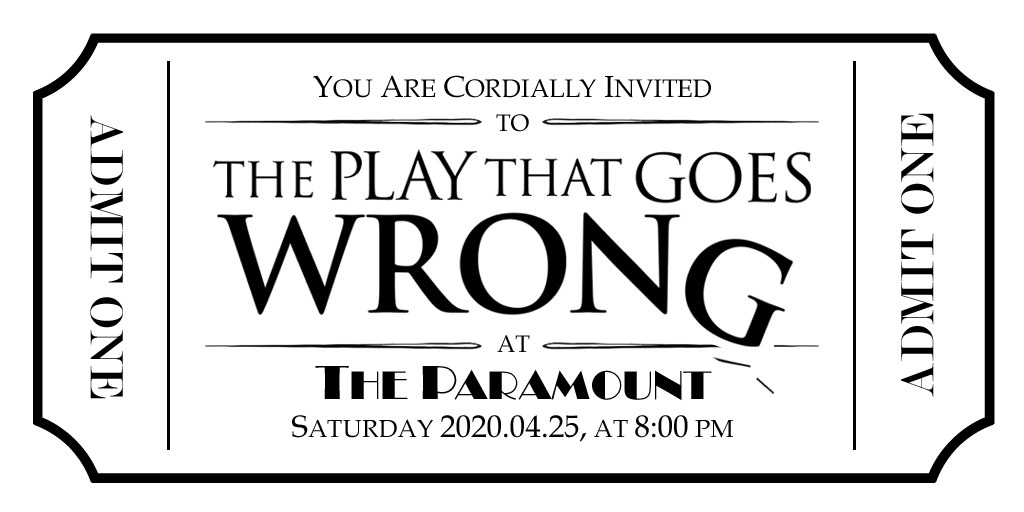
<style>
.page{position:relative;width:1024px;height:512px;background:#ffffff}
.page>*{position:absolute;margin:0}
.t1{font:25.2px "BookAntiqua";color:#000000}
.t2{font:30.2px "BookAntiqua";color:#000000}
.t3{font:23.6px/34.2px "BookAntiqua";color:#000000}
.t4{font:49.8px "Modern-Regular";letter-spacing:0.02em;color:#000000}
.t5{font:41.3px/47.5px "Broadway";color:#000000}
.t6{font:23.6px/47.5px "BookAntiqua";color:#000000}
.t7{font:49.6px/47.5px "Broadway";color:#000000}
.t8{font:31.1px "BookAntiqua";color:#000000}
.t9{font:24.9px "BookAntiqua";color:#000000}
</style>
<div class="page">
<p class="t1" style="left:313px;top:75px;width:398px;height:57px;text-align:center"><span class="t2">Y</span>OU<span class="t2"> A</span>RE<span class="t2"> C</span>ORDIALLY<span class="t2"> I</span>NVITED<br><span class="t3">TO</span></p>
<p class="t4" style="left:901px;top:113px;width:33px;height:284px;rotate:-90deg">ADMIT ONE</p>
<p class="t4" style="left:90px;top:115px;width:33px;height:284px;rotate:90deg">ADMIT ONE</p>
<p class="t5" style="left:315px;top:335px;width:397px;height:66px;text-align:center"><span class="t6">AT<br></span><span class="t7">T</span>HE<span class="t7"> P</span>ARAMOUNT</p>
<p class="t8" style="left:292px;top:415px;width:441px;height:27px">S<span class="t9">ATURDAY </span>2020.04.25,<span class="t9"> AT </span>8:00<span class="t9"> PM</span></p>
</div>
